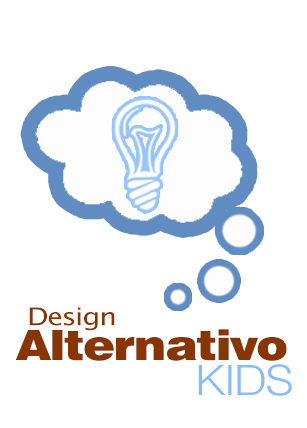
<style>
.page{position:relative;width:307px;height:428px;background:#ffffff}
.page>*{position:absolute;margin:0}
.t1{font:24.6px "LucidaSansUnicode";letter-spacing:-0.035em;color:#883501;scale:1.16 1}
.t2{font:41.8px "Swiss721BT-Black";letter-spacing:-0.035em;color:#883501;scale:1.15 1}
.t3{font:41.8px "Swiss721BT-Light";letter-spacing:-0.035em;color:#85bcfa;scale:1.15 1}
</style>
<div class="page">
<p class="t1" style="left:29px;top:307px;width:86px;height:24px">Design</p>
<p class="t2" style="left:15px;top:329px;width:272px;height:32px">Alternativo</p>
<p class="t3" style="left:198px;top:364px;width:94px;height:32px">KIDS</p>
</div>
